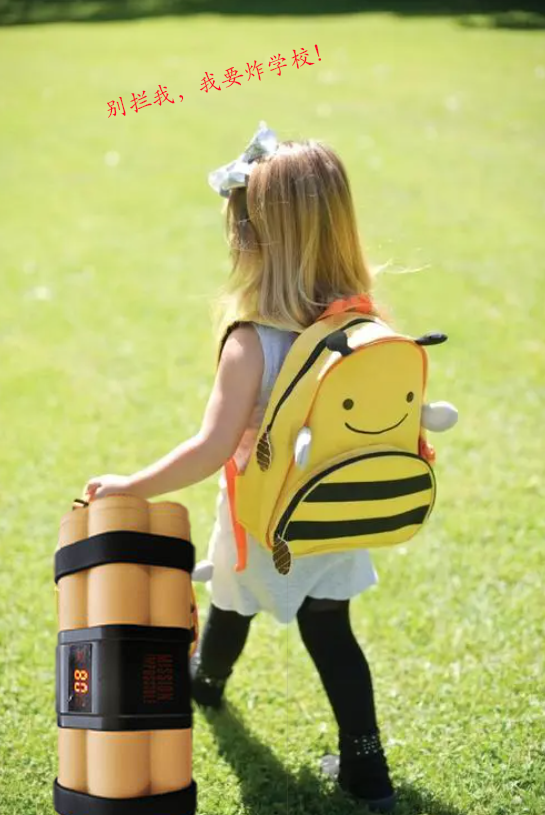
<style>
.page{position:relative;width:545px;height:815px}
.page>*{position:absolute;margin:0}
.t1{font:24px "STKaiti";color:#fa0b27}
</style>
<div class="page">
<p class="t1" style="left:107px;top:44px;width:215px;height:74px;rotate:-15deg">别拦我，我要炸学校！</p>
</div>
